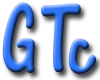
<style>
.page{position:relative;width:100px;height:80px;background:#ffffff}
.page>*{position:absolute;margin:0}
.t1{font:101.6px "ARCENA";scale:0.83 1}
.t2{font:75.3px "ARCENA";scale:1.12 1}
</style>
<div class="page">
<p class="t1" style="left:2px;top:2px;width:79px;height:71px">GT</p>
<p class="t2" style="left:68px;top:38px;width:28px;height:36px;rotate:-13deg">c</p>
</div>
